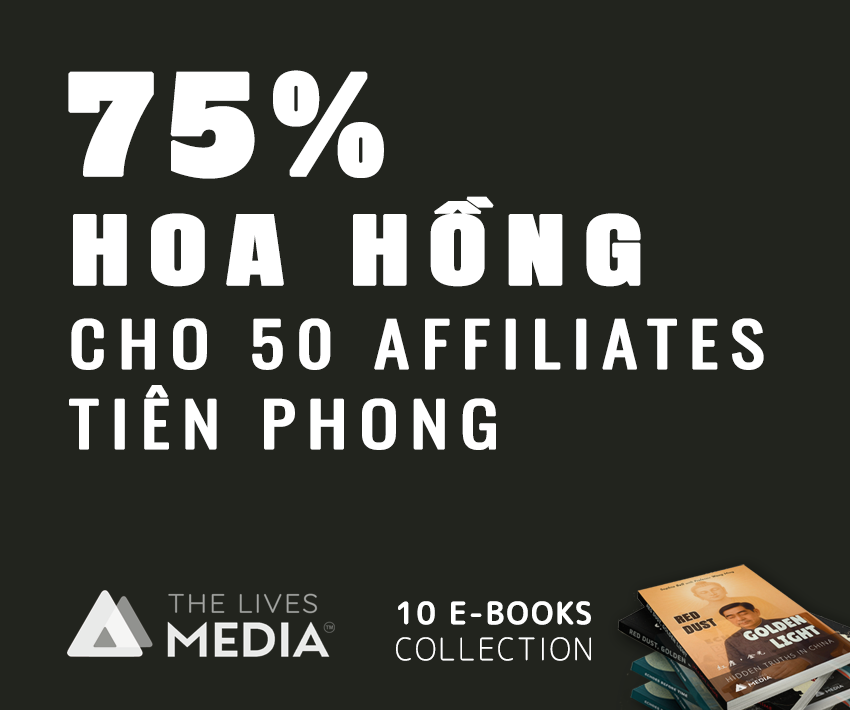
<style>
.page{position:relative;width:850px;height:710px;background:#22241e}
.page>*{position:absolute;margin:0}
.t1{font:130px "AlfaSlabOne-Regular";letter-spacing:0.1em;color:#ffffff;font-weight:bold}
.t2{font:80px "Anton-Regular";letter-spacing:0.13em;color:#ffffff;font-weight:bold;scale:1.5 1}
.t3{font:60px/80px "Oswald-Regular";letter-spacing:0.14em;color:#ffffff;font-weight:bold;scale:1.2 1}
.t4{font:30px "RoundedMplus1c-Medium";letter-spacing:0.06em;color:#ffffff;font-weight:bold}
.t5{font:30px "RoundedMplus1c-Thin";letter-spacing:0.06em;color:#ffffff;font-weight:bold}
</style>
<div class="page">
<p class="t1" style="left:68px;top:70px;width:316px;height:109px">75%</p>
<p class="t2" style="left:73px;top:196px;width:568px;height:91px">HOA HỒNG</p>
<p class="t3" style="left:69px;top:318px;width:695px;height:132px">CHO 50 AFFILIATES TIÊN PHONG</p>
<p class="t4" style="left:396px;top:601px;width:195px;height:60px">10 E-BOOKS <br><span class="t5">COLLECTION</span></p>
</div>
